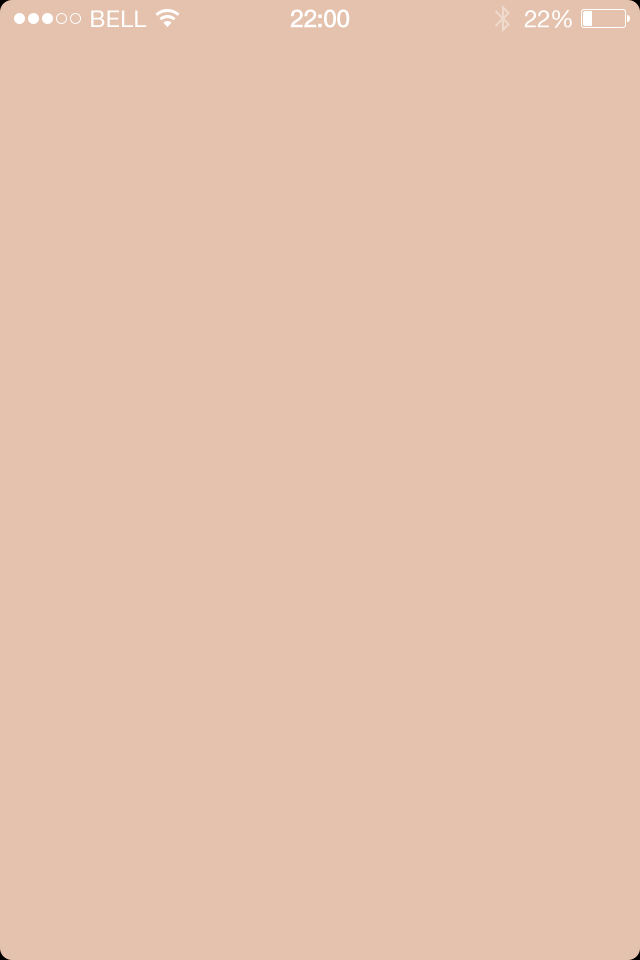
<style>
.page{position:relative;width:640px;height:960px;background:#e5c2ae}
.page>*{position:absolute;margin:0}
.t1{font:23px "HelveticaNeue";letter-spacing:0.02em;color:#ffffff}
.t2{font:25px "HelveticaNeue-Medium";letter-spacing:-0.02em;color:#ffffff}
.t3{font:24px "HelveticaNeue";letter-spacing:-0.02em;color:#ffffff}
</style>
<div class="page">
<p class="t1" style="left:91px;top:10px;width:56px;height:17px">BELL</p>
<p class="t2" style="left:290px;top:9px;width:60px;height:19px">22:00</p>
<p class="t3" style="left:524px;top:10px;width:48px;height:18px">22%</p>
</div>
